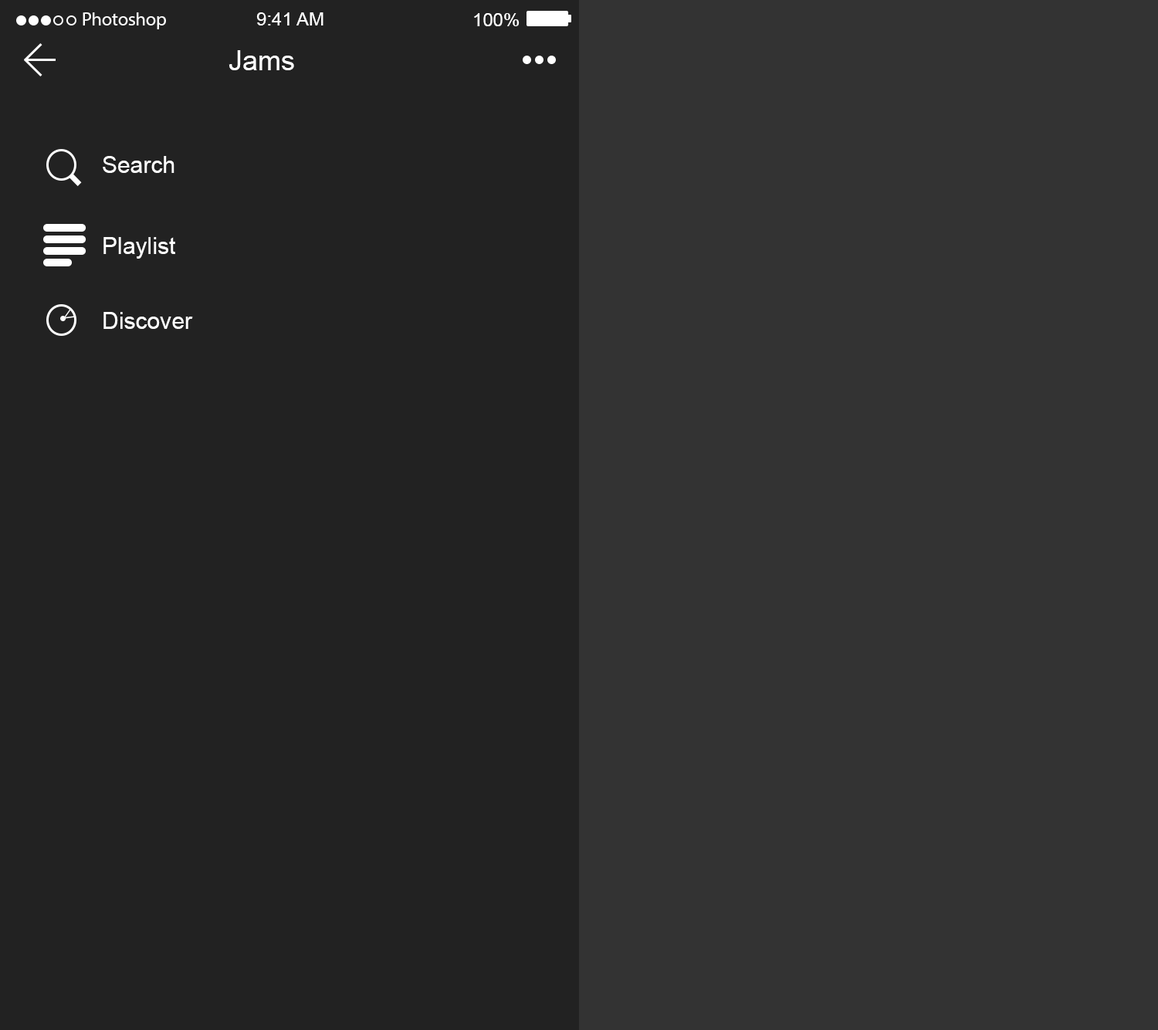
<style>
.page{position:relative;width:1158px;height:1030px;background:#333333}
.page>*{position:absolute;margin:0}
.t1{font:18.5px "MyriadPro-Regular";color:#ffffff}
.t2{font:18.5px "ArialMT";color:#ffffff}
.t3{font:27.8px "ArialMT";color:#ffffff}
.t4{font:23.2px "ArialMT";color:#ffffff}
</style>
<div class="page">
<p class="t1" style="left:83px;top:12px;width:83px;height:17px">Photoshop</p>
<p class="t2" style="left:256px;top:12px;width:67px;height:13px">9:41 AM</p>
<p class="t2" style="left:474px;top:13px;width:46px;height:13px">100%</p>
<p class="t3" style="left:228px;top:50px;width:66px;height:20px">Jams</p>
<p class="t4" style="left:103px;top:156px;width:71px;height:17px">Search</p>
<p class="t4" style="left:103px;top:237px;width:72px;height:22px">Playlist</p>
<p class="t4" style="left:103px;top:312px;width:90px;height:17px">Discover</p>
</div>
